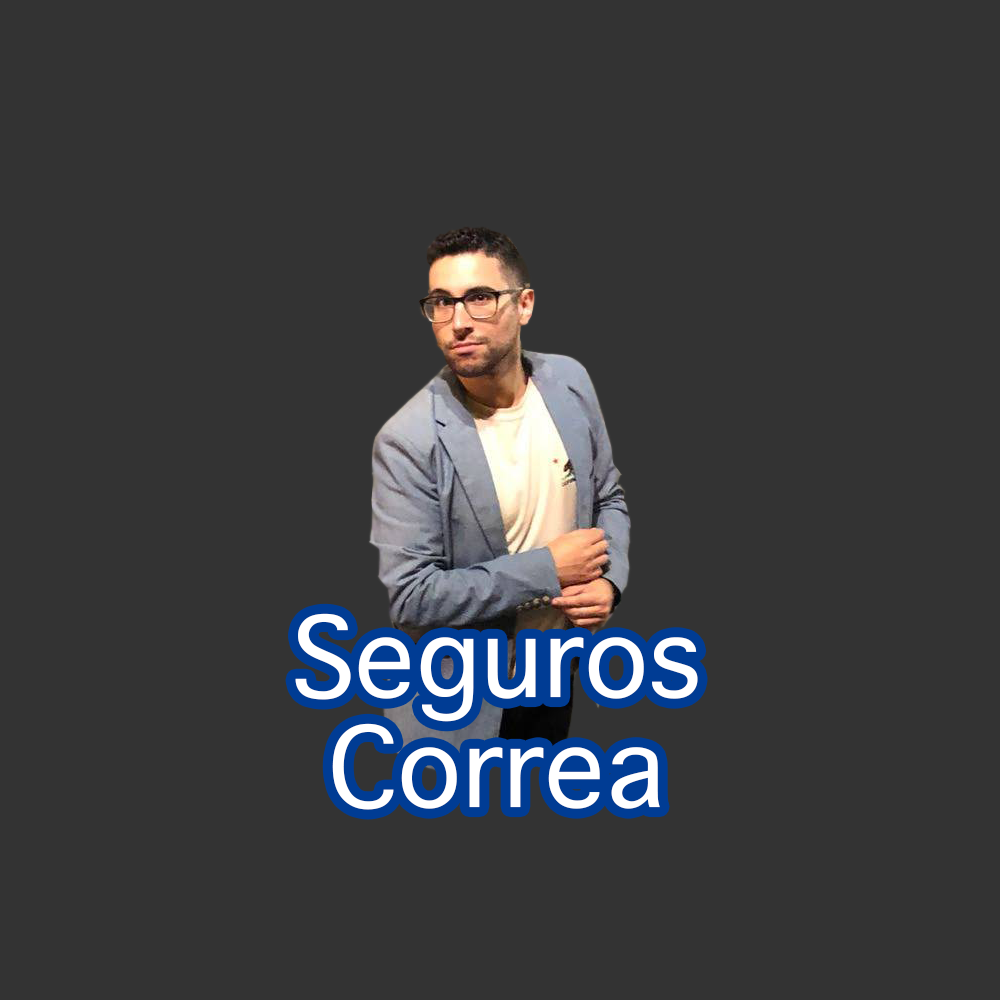
<style>
.page{position:relative;width:1000px;height:1000px;background:#333333}
.page>*{position:absolute;margin:0}
.t1{font:150px/110px "AppleSymbols";color:#ffffff}
</style>
<div class="page">
<p class="t1" style="left:295px;top:613px;width:403px;height:197px;text-align:center">Seguros<br>Correa</p>
</div>
